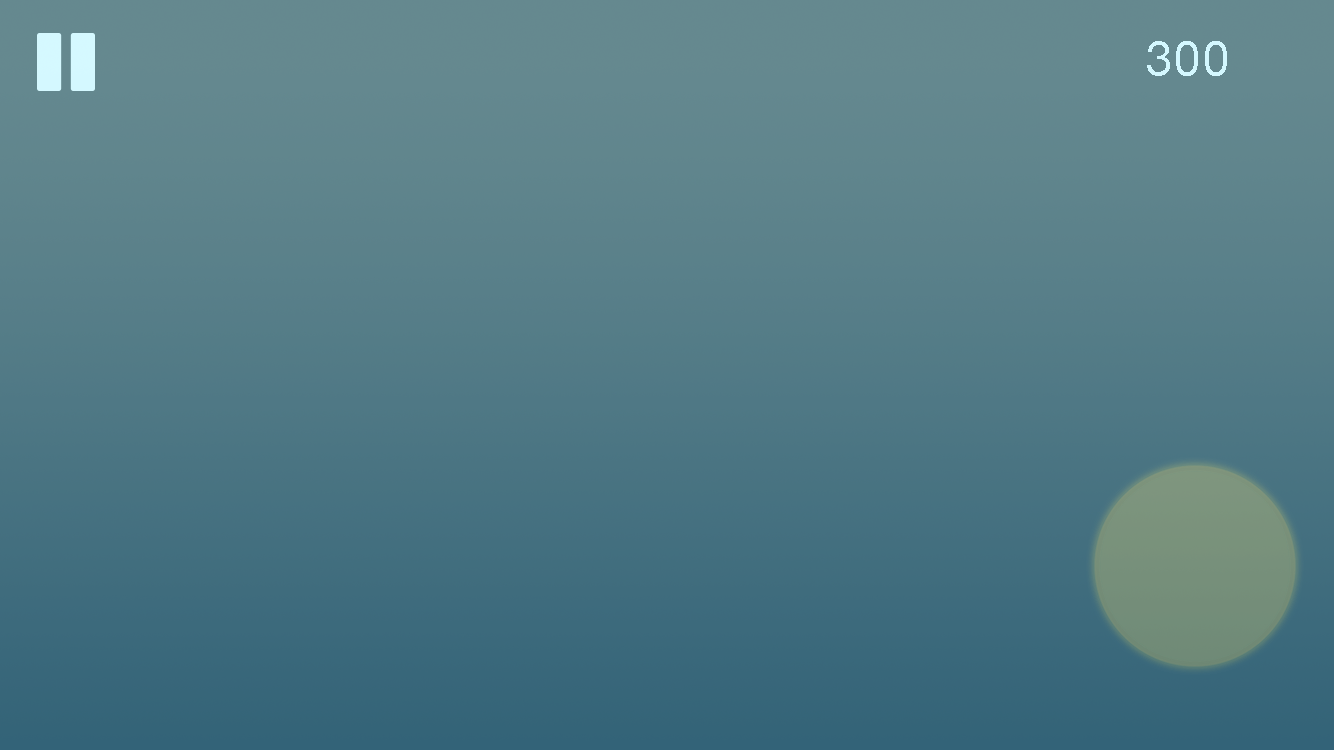
<style>
.page{position:relative;width:1334px;height:750px}
.page>*{position:absolute;margin:0}
.t1{font:48px "HelveticaNeue";letter-spacing:0.04em;color:#d4f8ff}
</style>
<div class="page">
<p class="t1" style="left:1147px;top:41px;width:80px;height:35px">300</p>
</div>
